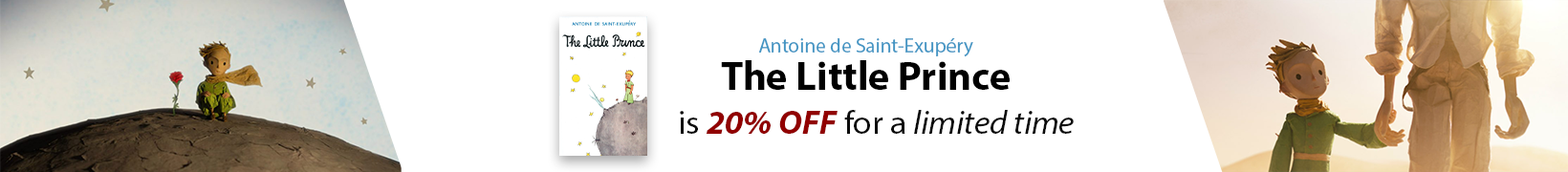
<style>
.page{position:relative;width:1568px;height:172px;background:#ffffff}
.page>*{position:absolute;margin:0}
.t1{font:20.2px "MyriadPro-Regular";color:#4496c4}
.t2{font:40.5px "MyriadPro-Bold";color:#000000}
.t3{font:33.7px "MyriadPro-It";color:#0b0b0b}
.t4{font:33.7px "MyriadPro-Regular";color:#0b0b0b}
.t5{font:33.7px "MyriadPro-BoldIt";color:#910000}
</style>
<div class="page">
<p class="t1" style="left:758px;top:38px;width:215px;height:19px">Antoine de Saint-Exupéry</p>
<p class="t2" style="left:721px;top:60px;width:289px;height:30px">The Little Prince</p>
<p class="t3" style="left:680px;top:110px;width:394px;height:25px"><span class="t4">is </span><span class="t5">20% OFF</span><span class="t4"> for a </span>limited time</p>
</div>
